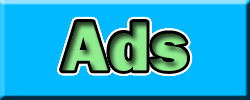
<style>
.page{position:relative;width:250px;height:100px;background:#00b9ff}
.page>*{position:absolute;margin:0}
.t1{font:72px "FranklinGothic-Heavy";color:#90ee90}
</style>
<div class="page">
<p class="t1" style="left:62px;top:22px;width:125px;height:49px">Ads</p>
</div>
